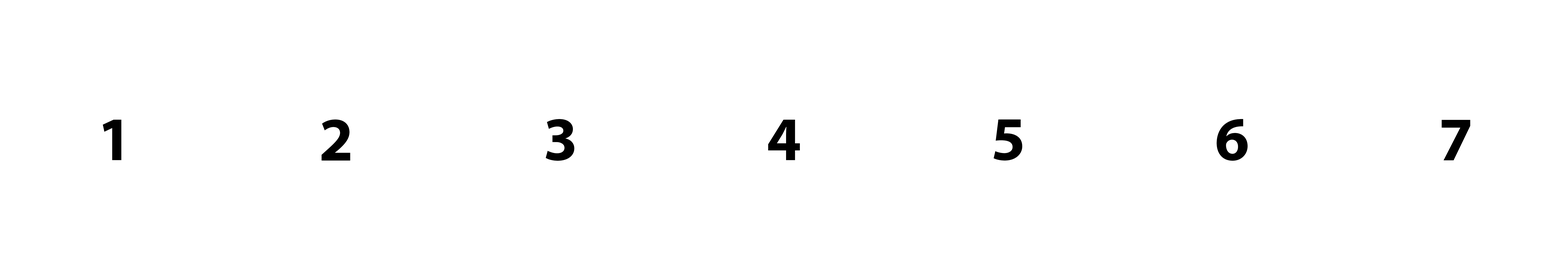
<style>
.page{position:relative;width:1568px;height:280px;background:#ffffff}
.page>*{position:absolute;margin:0}
.t1{font:62.2px "MyriadPro-Bold";color:#000000}
</style>
<div class="page">
<p class="t1" style="left:103px;top:120px;width:18px;height:40px">1</p>
<p class="t1" style="left:321px;top:119px;width:29px;height:42px">2</p>
<p class="t1" style="left:546px;top:119px;width:28px;height:42px">3</p>
<p class="t1" style="left:768px;top:120px;width:32px;height:40px">4</p>
<p class="t1" style="left:993px;top:119px;width:29px;height:42px">5</p>
<p class="t1" style="left:1217px;top:119px;width:31px;height:42px">6</p>
<p class="t1" style="left:1442px;top:120px;width:28px;height:40px">7</p>
</div>
